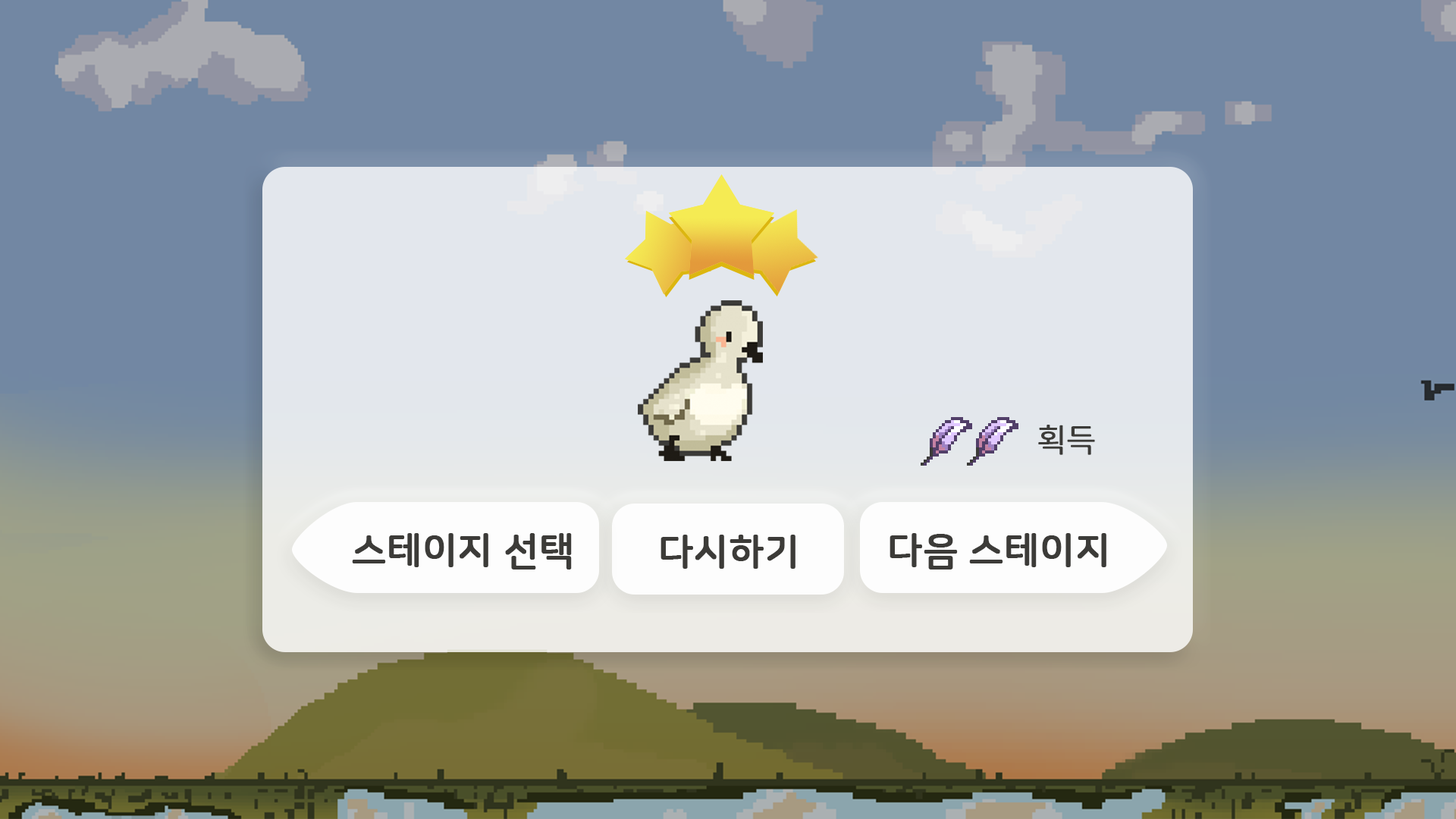
<style>
.page{position:relative;width:1456px;height:819px;background:#7287a3}
.page>*{position:absolute;margin:0}
.t1{font:31.6px "NanumSquareRoundR";color:#3c3b38;font-weight:bold}
.t2{font:37.9px "NanumSquareRoundB";color:#3c3b38;font-weight:bold}
</style>
<div class="page">
<p class="t1" style="left:1038px;top:425px;width:57px;height:30px">획득</p>
<p class="t2" style="left:352px;top:533px;width:220px;height:37px">스테이지 선택</p>
<p class="t2" style="left:890px;top:533px;width:216px;height:37px">다음 스테이지</p>
<p class="t2" style="left:660px;top:535px;width:135px;height:34px">다시하기</p>
</div>
